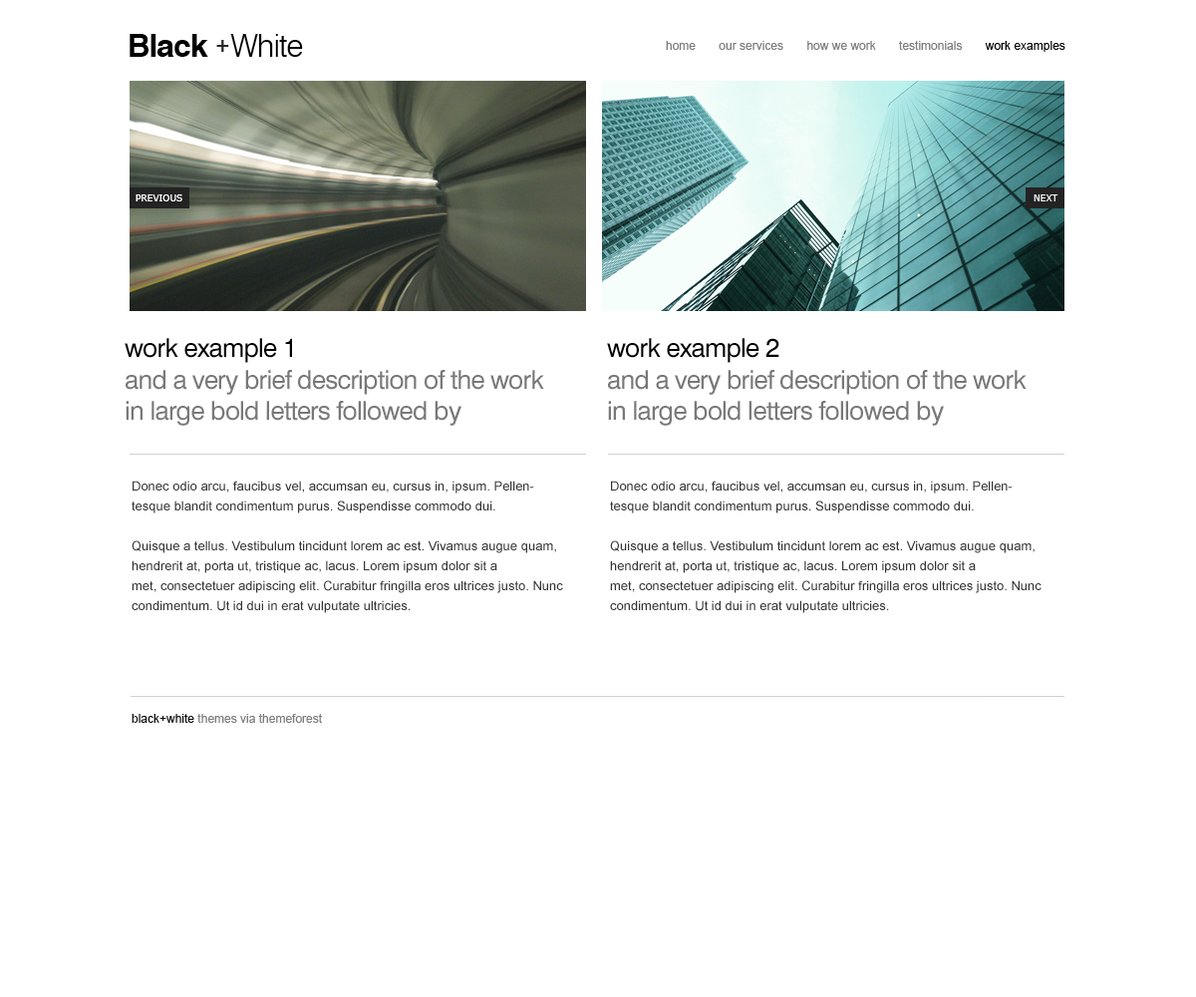
<style>
.page{position:relative;width:1196px;height:997px;background:#ffffff}
.page>*{position:absolute;margin:0}
.t1{font:31.7px "Swiss721BT-Bold";letter-spacing:-0.03em;color:#000000}
.t2{font:31.7px "Swiss721BT-Light";letter-spacing:-0.03em;color:#000000}
.t3{font:19.9px "Swiss721BT-Heavy";color:#262626}
.t4{font:12px "ArialMT";color:#7e7e7e}
.t5{font:12px "ArialMT";color:#000000}
.t6{font:9px "Verdana";color:#ffffff;text-transform:uppercase}
.t7{font:25.9px "Swiss721BT-Roman";letter-spacing:-0.03em;color:#787878}
.t8{font:25.9px "Swiss721BT-Roman";letter-spacing:-0.03em;color:#000000}
.t9{font:13px/19.9px "ArialMT";color:#353535}
.t10{font:12px "ArialMT";color:#0e0d0d}
</style>
<div class="page">
<p class="t1" style="left:130px;top:34px;width:173px;height:23px">Black   <span class="t2">White</span></p>
<p class="t3" style="left:216px;top:40px;width:13px;height:12px">+</p>
<p class="t4" style="left:666px;top:41px;width:400px;height:11px">home       our services       how we work       testimonials      <span class="t5"> work examples</span></p>
<p class="t6" style="left:136px;top:194px;width:46px;height:7px">PREVIOUS</p>
<p class="t6" style="left:1034px;top:194px;width:25px;height:7px">NEXT</p>
<p class="t7" style="left:125px;top:338px;width:419px;height:88px"><span class="t8">work example 1<br></span>and a very brief description of the work<br>in large bold letters followed by</p>
<p class="t7" style="left:607px;top:338px;width:420px;height:88px"><span class="t8">work example 2<br></span>and a very brief description of the work<br>in large bold letters followed by</p>
<p class="t9" style="left:132px;top:480px;width:431px;height:133px">Donec odio arcu, faucibus vel, accumsan eu, cursus in, ipsum. Pellentesque blandit condimentum purus. Suspendisse commodo dui. <br><br>Quisque a tellus. Vestibulum tincidunt lorem ac est. Vivamus augue quam, hendrerit at, porta ut, tristique ac, lacus. Lorem ipsum dolor sit a<br>met, consectetuer adipiscing elit. Curabitur fringilla eros ultrices justo. Nunc condimentum. Ut id dui in erat vulputate ultricies.</p>
<p class="t9" style="left:610px;top:480px;width:432px;height:133px">Donec odio arcu, faucibus vel, accumsan eu, cursus in, ipsum. Pellentesque blandit condimentum purus. Suspendisse commodo dui. <br><br>Quisque a tellus. Vestibulum tincidunt lorem ac est. Vivamus augue quam, hendrerit at, porta ut, tristique ac, lacus. Lorem ipsum dolor sit a<br>met, consectetuer adipiscing elit. Curabitur fringilla eros ultrices justo. Nunc condimentum. Ut id dui in erat vulputate ultricies.</p>
<p class="t4" style="left:132px;top:714px;width:190px;height:9px"><span class="t10">black+white</span> themes via themeforest</p>
</div>
